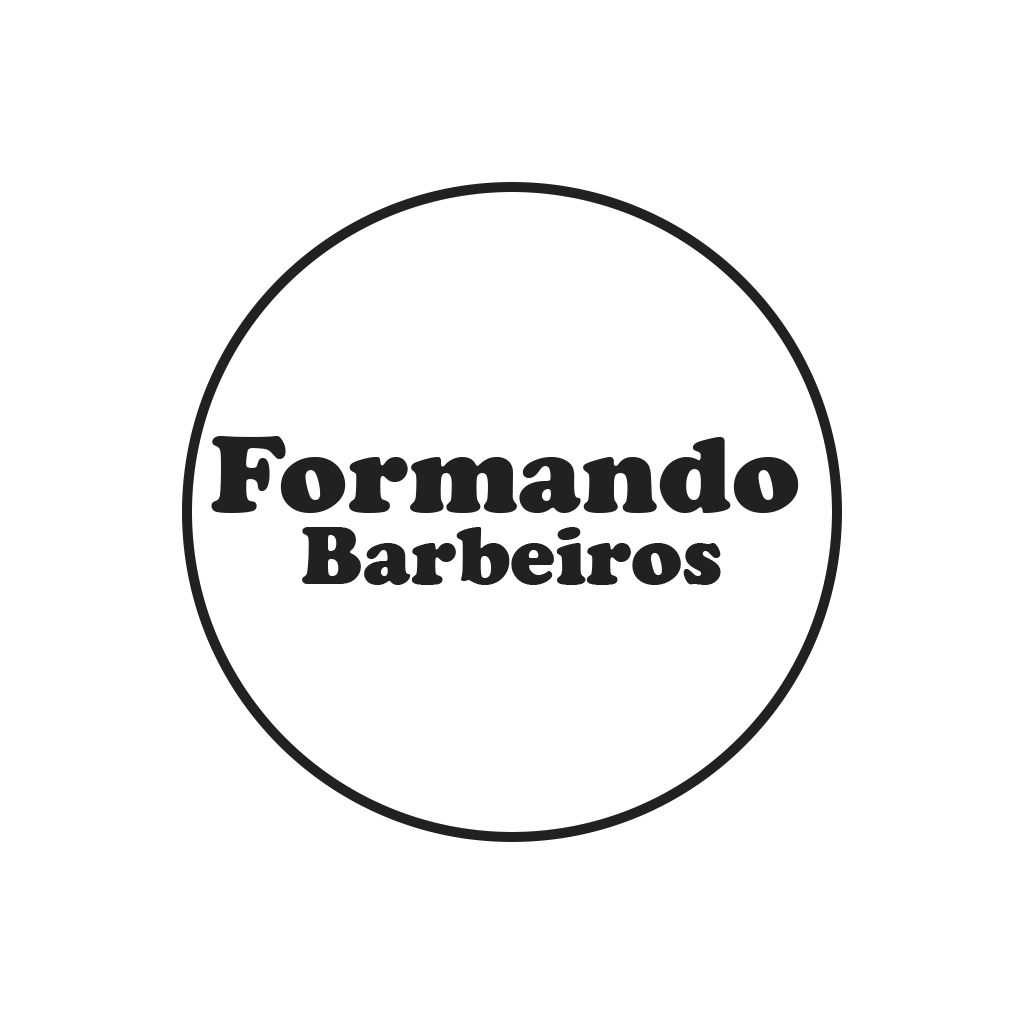
<style>
.page{position:relative;width:1024px;height:1024px;background:#ffffff}
.page>*{position:absolute;margin:0}
.t1{font:113.3px "CooperBlack";color:#212121}
.t2{font:85.3px "CooperBlack";color:#212121}
</style>
<div class="page">
<p class="t1" style="left:211px;top:436px;width:588px;height:78px">Formando</p>
<p class="t2" style="left:302px;top:527px;width:419px;height:58px">Barbeiros</p>
</div>
